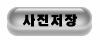
<style>
.page{position:relative;width:100px;height:40px}
.page>*{position:absolute;margin:0}
.t1{font:14px "¼­¿ïÇìµå¶óÀÎ";color:#000000}
</style>
<div class="page">
<p class="t1" style="left:22px;top:14px;width:55px;height:13px">사진저장</p>
</div>
